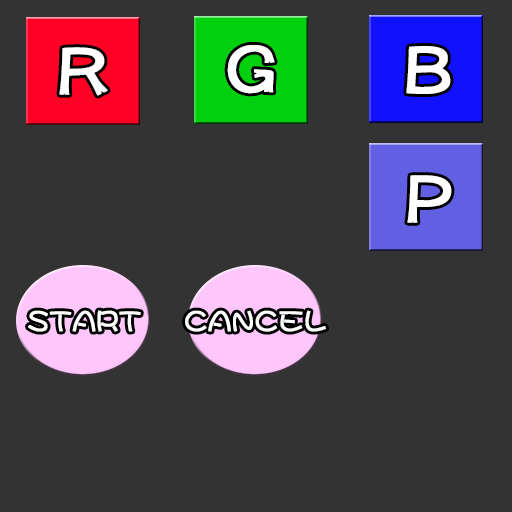
<style>
.page{position:relative;width:512px;height:512px;background:#333333}
.page>*{position:absolute;margin:0}
.t1{font:60px "DFPOPClip-W7-WINP-RKSJ-H";color:#ffffff;font-weight:bold}
.t2{font:28px "DFMaruMojiSQ-W5-WINP-RKSJ-H";color:#ffffff;font-weight:bold}
</style>
<div class="page">
<p class="t1" style="left:59px;top:47px;width:49px;height:49px">R</p>
<p class="t1" style="left:227px;top:45px;width:48px;height:49px">G</p>
<p class="t1" style="left:406px;top:46px;width:45px;height:48px">B</p>
<p class="t1" style="left:407px;top:175px;width:45px;height:48px">P</p>
<p class="t2" style="left:28px;top:310px;width:113px;height:22px">START</p>
<p class="t2" style="left:185px;top:310px;width:141px;height:22px">CANCEL</p>
</div>
